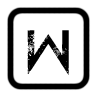
<style>
.page{position:relative;width:96px;height:96px;background:#ffffff}
.page>*{position:absolute;margin:0}
.t1{font:66.7px "BlackedOut-Regular";color:#000000}
</style>
<div class="page">
<p class="t1" style="left:27px;top:30px;width:42px;height:45px">W</p>
</div>
